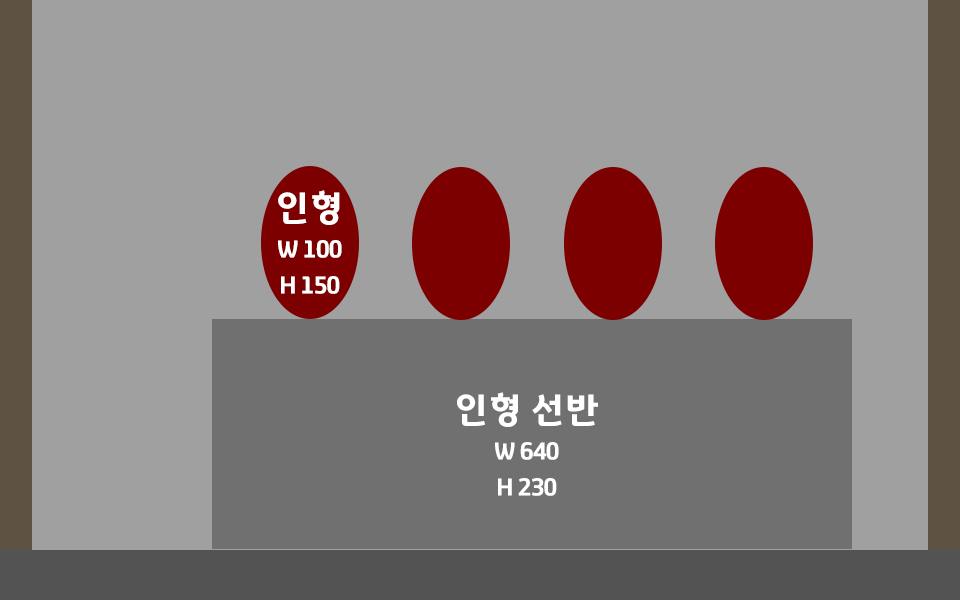
<style>
.page{position:relative;width:960px;height:600px;background:#a0a0a0}
.page>*{position:absolute;margin:0}
.t1{font:24px/36px "GyeonggiTitleV";letter-spacing:-0.05em;color:#ffffff}
.t2{font:36px/12px "GyeonggiTitleV";letter-spacing:-0.05em;color:#ffffff}
</style>
<div class="page">
<p class="t1" style="left:278px;top:190px;width:64px;height:104px;text-align:center"><span class="t2">인형<br><br><br><br></span>W 100<br>H 150</p>
<p class="t1" style="left:457px;top:392px;width:141px;height:104px;text-align:center"><span class="t2">인형 선반<br><br><br><br></span>W 640<br>H 230</p>
</div>
